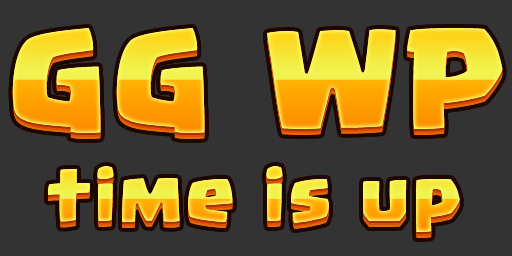
<style>
.page{position:relative;width:512px;height:256px;background:#333333}
.page>*{position:absolute;margin:0}
.t1{font:102.6px "Supercell-Magic";letter-spacing:0.06em}
.t2{font:56.4px "Supercell-Magic";letter-spacing:0.06em}
</style>
<div class="page">
<p class="t1" style="left:12px;top:28px;width:491px;height:105px">GG WP</p>
<p class="t2" style="left:48px;top:166px;width:412px;height:66px">time is up</p>
</div>
